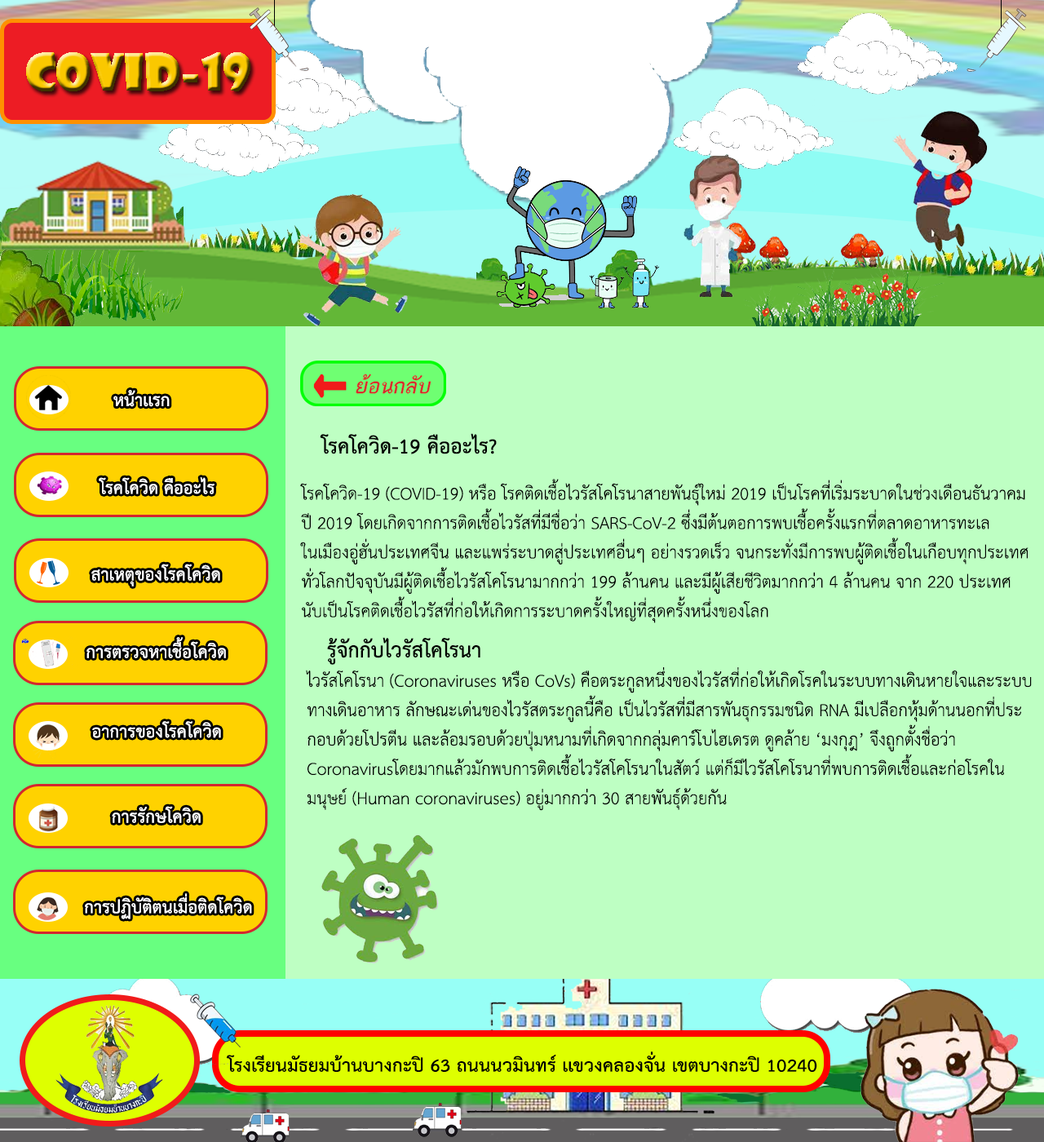
<style>
.page{position:relative;width:1044px;height:1142px;background:#beffc3}
.page>*{position:absolute;margin:0}
.t1{font:24.5px "THSarabunPSK-Bold";color:#ffffff}
.t2{font:29.4px "THSarabunPSK-Bold";color:#000000}
.t3{font:24.5px "THSarabunPSK";color:#000000}
</style>
<div class="page">
<p class="t1" style="left:113px;top:390px;width:57px;height:17px">หน้าเเรก</p>
<p class="t2" style="left:320px;top:433px;width:177px;height:21px">โรคโควิด-19 คืออะไร?</p>
<p class="t1" style="left:99px;top:477px;width:116px;height:17px">โรคโควิด คืออะไร</p>
<p class="t3" style="left:300px;top:479px;width:729px;height:144px">โรคโควิด-19 (COVID-19) หรือ โรคติดเชื้อไวรัสโคโรนาสายพันธุ์ใหม่ 2019 เป็นโรคที่เริ่มระบาดในช่วงเดือนธันวาคม<br>ปี 2019 โดยเกิดจากการติดเชื้อไวรัสที่มีชื่อว่า SARS-CoV-2 ซึ่งมีต้นตอการพบเชื้อครั้งแรกที่ตลาดอาหารทะเล<br>ในเมืองอู่ฮั่นประเทศจีน และแพร่ระบาดสู่ประเทศอื่นๆ อย่างรวดเร็ว จนกระทั่งมีการพบผู้ติดเชื้อในเกือบทุกประเทศ<br>ทั่วโลกปัจจุบันมีผู้ติดเชื้อไวรัสโคโรนามากกว่า 199 ล้านคน และมีผู้เสียชีวิตมากกว่า 4 ล้านคน จาก 220 ประเทศ<br>นับเป็นโรคติดเชื้อไวรัสที่ก่อให้เกิดการระบาดครั้งใหญ่ที่สุดครั้งหนึ่งของโลก</p>
<p class="t1" style="left:91px;top:564px;width:129px;height:23px">สาเหตุของโรคโควิด</p>
<p class="t1" style="left:86px;top:637px;width:140px;height:21px">การตรวจหาเชื้อโควิด</p>
<p class="t3" style="left:306px;top:637px;width:726px;height:174px"><span class="t2">   รู้จักกับไวรัสโคโรนา<br></span>ไวรัสโคโรนา (Coronaviruses หรือ CoVs) คือตระกูลหนึ่งของไวรัสที่ก่อให้เกิดโรคในระบบทางเดินหายใจและระบบ<br>ทางเดินอาหาร ลักษณะเด่นของไวรัสตระกูลนี้คือ เป็นไวรัสที่มีสารพันธุกรรมชนิด RNA มีเปลือกหุ้มด้านนอกที่ประ<br>กอบด้วยโปรตีน และล้อมรอบด้วยปุ่มหนามที่เกิดจากกลุ่มคาร์โบไฮเดรต ดูคล้าย ‘มงกุฎ’ จึงถูกตั้งชื่อว่า <br>Coronavirusโดยมากแล้วมักพบการติดเชื้อไวรัสโคโรนาในสัตว์ แต่ก็มีไวรัสโคโรนาที่พบการติดเชื้อและก่อโรคใน<br>มนุษย์ (Human coronaviruses) อยู่มากกว่า 30 สายพันธุ์ด้วยกัน</p>
<p class="t1" style="left:92px;top:721px;width:129px;height:17px">อาการของโรคโควิด</p>
<p class="t1" style="left:112px;top:806px;width:89px;height:17px">การรักษโควิด</p>
<p class="t1" style="left:85px;top:893px;width:167px;height:26px">การปฏิบัติตนเมื่อติดโควิด</p>
</div>
